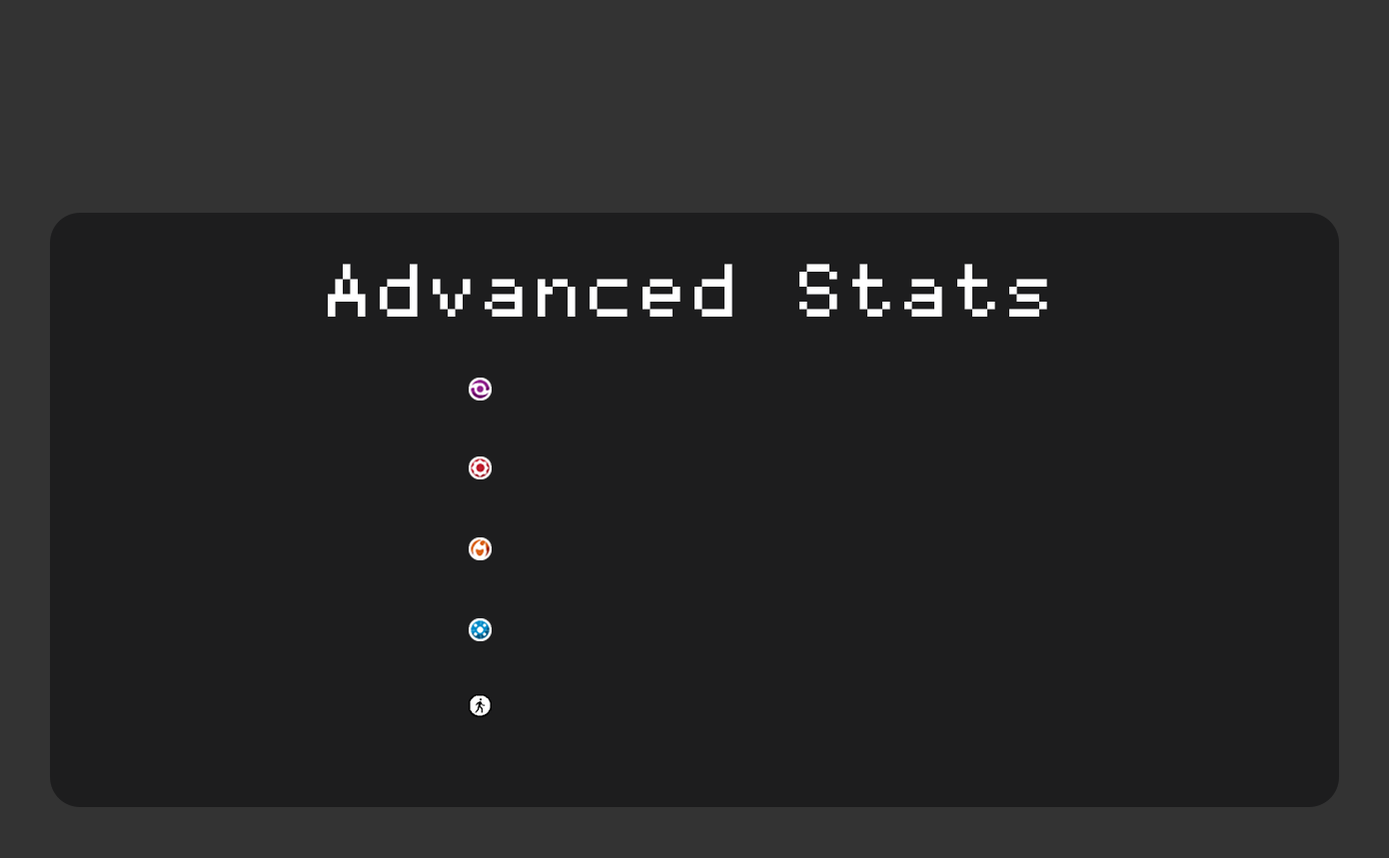
<style>
.page{position:relative;width:1389px;height:858px;background:#1d1d1e}
.page>*{position:absolute;margin:0}
.t1{font:60px "Mono0756";color:#ffffff}
</style>
<div class="page">
<p class="t1" style="left:328px;top:264px;width:719px;height:53px">Advanced Stats</p>
</div>
